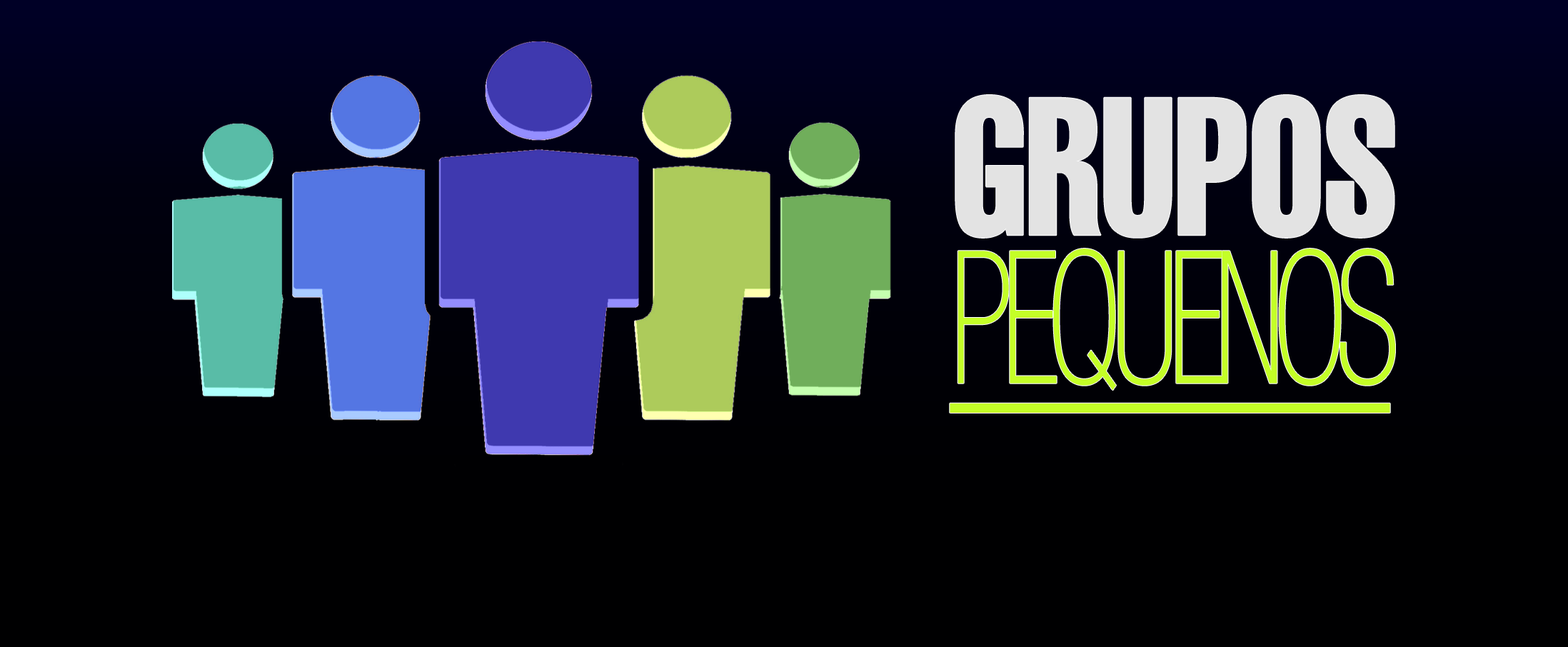
<style>
.page{position:relative;width:1568px;height:647px;background:#000001}
.page>*{position:absolute;margin:0}
.t1{font:185.3px "Helvetica37-CondensedThin";letter-spacing:-0.075em;color:#c4fe27;text-transform:uppercase;text-decoration:underline;scale:0.72 1}
.t2{font:192.7px "Helvetica-Compressed";color:#e3e3e3;text-transform:uppercase;scale:0.83 1}
</style>
<div class="page">
<p class="t1" style="left:950px;top:95px;width:445px;height:318px;text-align:center"><span class="t2"> Grupos <br></span>Pequenos</p>
</div>
